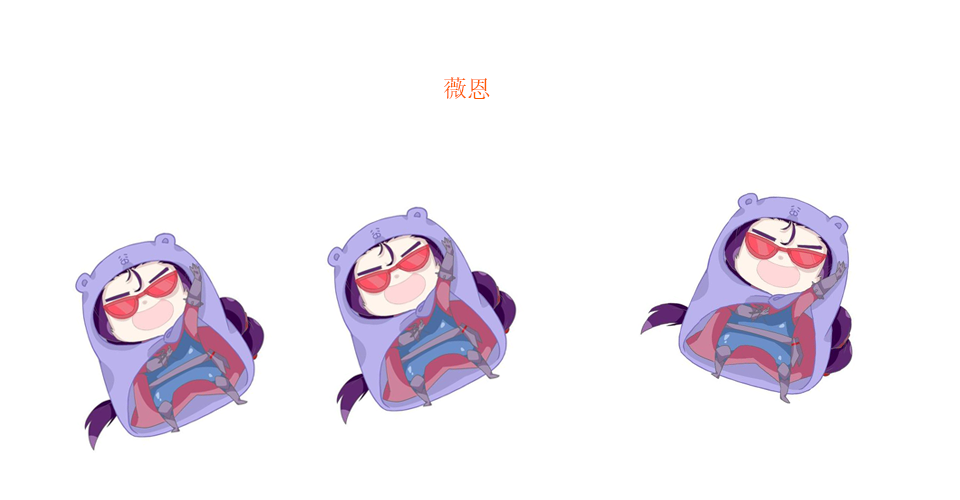
<style>
.page{position:relative;width:960px;height:500px;background:#ffffff}
.page>*{position:absolute;margin:0}
.t1{font:24px "SimSun";color:#ff5a00}
</style>
<div class="page">
<p class="t1" style="left:444px;top:77px;width:46px;height:22px">薇恩</p>
</div>
